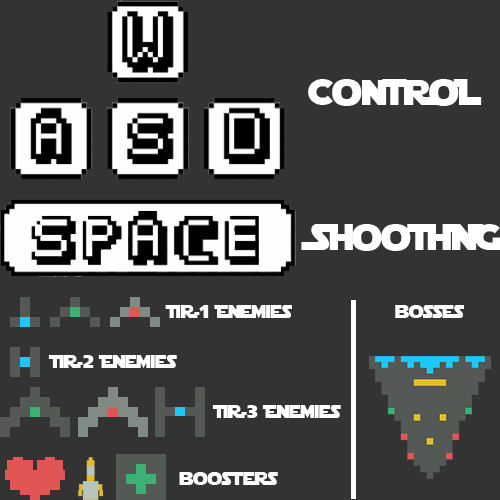
<style>
.page{position:relative;width:500px;height:500px;background:#333333}
.page>*{position:absolute;margin:0}
.t1{font:36px "StarJedi";letter-spacing:-0.025em;color:#ffffff}
.t2{font:18px "StarJedi";letter-spacing:-0.025em;color:#ffffff}
</style>
<div class="page">
<p class="t1" style="left:301px;top:224px;width:200px;height:27px">SHooTING</p>
<p class="t2" style="left:165px;top:305px;width:127px;height:13px">TiR-1 Enemies</p>
<p class="t2" style="left:395px;top:305px;width:69px;height:13px">bosses</p>
<p class="t2" style="left:48px;top:355px;width:129px;height:13px">TiR-2 Enemies</p>
<p class="t2" style="left:212px;top:405px;width:129px;height:13px">TiR-3 Enemies</p>
<p class="t2" style="left:179px;top:472px;width:99px;height:13px">boosters</p>
</div>
